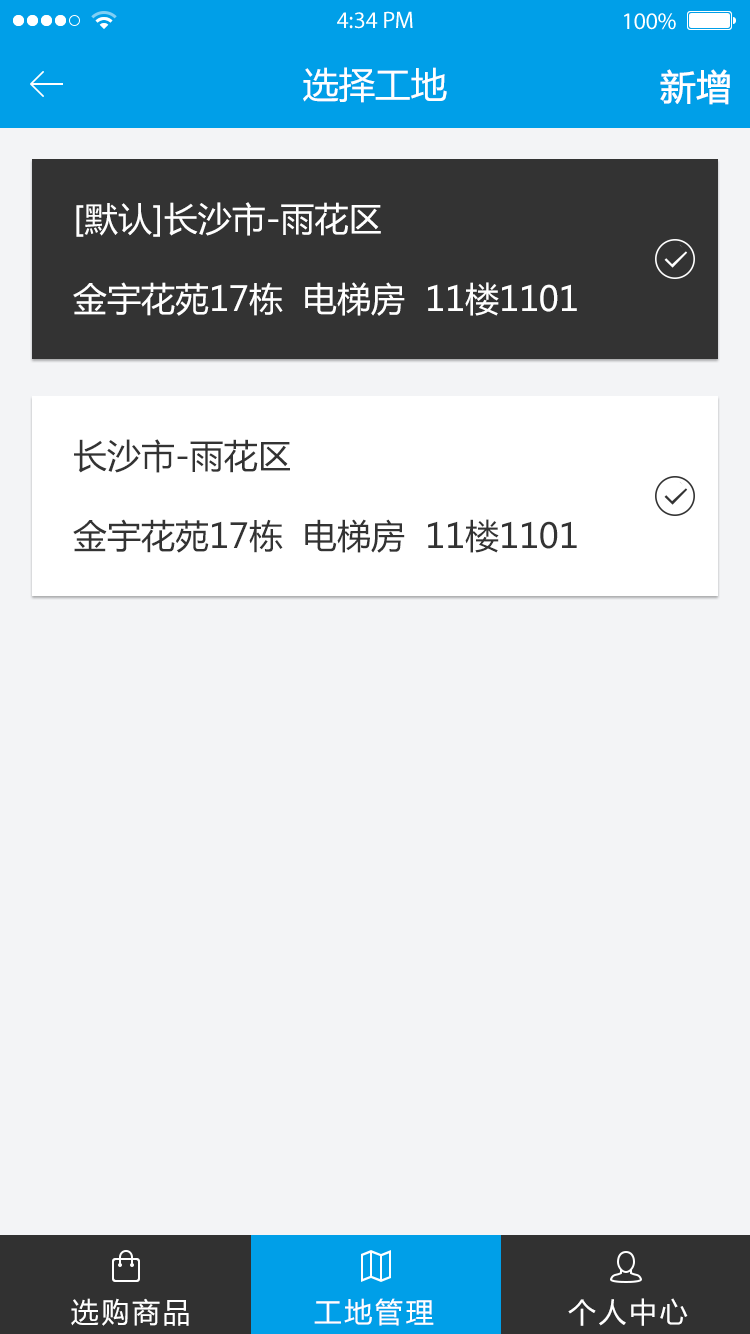
<style>
.page{position:relative;width:750px;height:1334px;background:#f3f4f6}
.page>*{position:absolute;margin:0}
.t1{font:36px "MicrosoftYaHei";color:#ffffff}
.t2{font:35px "MicrosoftYaHei";color:#ffffff;font-weight:bold}
.t3{font:34px/80px "MicrosoftYaHei";color:#ffffff}
.t4{font:34px/80px "MicrosoftYaHei";color:#333333}
.t5{font:28px "MicrosoftYaHei";letter-spacing:0.1em;color:#ffffff}
</style>
<div class="page">
<p class="t1" style="left:303px;top:67px;width:144px;height:36px">选择工地</p>
<p class="t2" style="left:660px;top:69px;width:70px;height:36px">新增</p>
<p class="t3" style="left:73px;top:202px;width:504px;height:114px">[默认]长沙市-雨花区<br>金宇花苑17栋  电梯房  11楼1101</p>
<p class="t4" style="left:73px;top:439px;width:504px;height:114px">长沙市-雨花区<br>金宇花苑17栋  电梯房  11楼1101</p>
<p class="t5" style="left:71px;top:1298px;width:617px;height:28px">选购商品           工地管理            个人中心</p>
</div>
